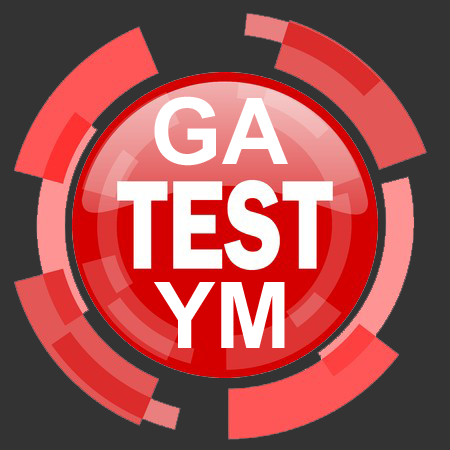
<style>
.page{position:relative;width:450px;height:450px;background:#333333}
.page>*{position:absolute;margin:0}
.t1{font:92px "Arial-BoldMT";color:#ffffff}
</style>
<div class="page">
<p class="t1" style="left:154px;top:96px;width:134px;height:70px">GA</p>
<p class="t1" style="left:154px;top:282px;width:131px;height:66px">YM</p>
</div>
